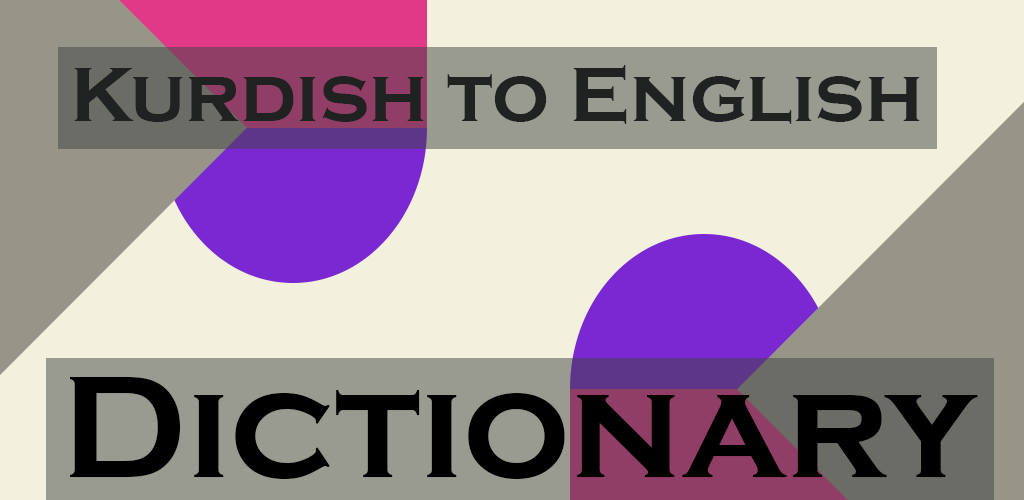
<style>
.page{position:relative;width:1024px;height:500px;background:#f3f1dd}
.page>*{position:absolute;margin:0}
.t1{font:80px "CopperplateGothic-Bold";color:#000000}
.t2{font:150px "CopperplateGothic-Bold";color:#000000}
</style>
<div class="page">
<p class="t1" style="left:74px;top:65px;width:846px;height:59px">Kurdish to English</p>
<p class="t2" style="left:70px;top:377px;width:908px;height:102px">Dictionary</p>
</div>
